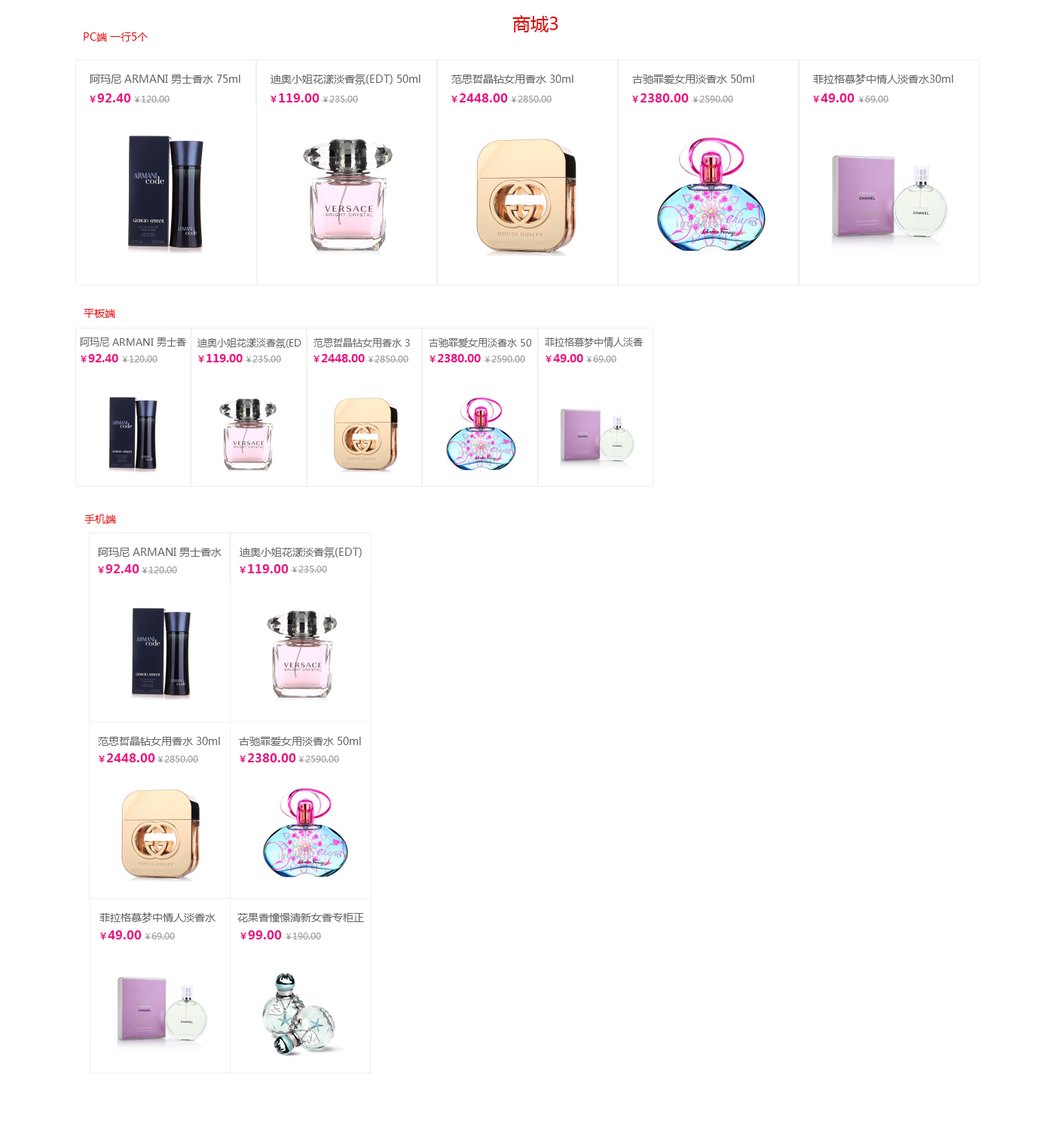
<style>
.page{position:relative;width:1055px;height:1130px;background:#ffffff}
.page>*{position:absolute;margin:0}
.t1{font:18.1px "MicrosoftYaHei";color:#e20404}
.t2{font:10.5px "MicrosoftYaHei";color:#e20404}
.t3{font:10.5px "MicrosoftYaHei";color:#666666}
.t4{font:12.1px "MicrosoftYaHei-Bold";color:#ed1283}
.t5{font:9px "MicrosoftYaHei-Bold";color:#ed1283}
.t6{font:9px "MicrosoftYaHei";color:#999999}
.t7{font:7.5px "MicrosoftYaHei";color:#999999}
.t8{font:9.8px "MicrosoftYaHei";color:#666666}
.t9{font:11.3px "MicrosoftYaHei-Bold";color:#ed1283}
</style>
<div class="page">
<p class="t1" style="left:512px;top:15px;width:46px;height:17px">商城3</p>
<p class="t2" style="left:84px;top:32px;width:64px;height:9px">PC端 一行5个</p>
<p class="t3" style="left:90px;top:75px;width:150px;height:9px">阿玛尼 ARMANI 男士香水 75ml</p>
<p class="t3" style="left:271px;top:74px;width:149px;height:10px">迪奥小姐花漾淡香氛(EDT) 50ml</p>
<p class="t3" style="left:451px;top:75px;width:122px;height:9px">范思哲晶钻女用香水 30ml</p>
<p class="t3" style="left:632px;top:75px;width:122px;height:9px">古驰罪爱女用淡香水 50ml</p>
<p class="t3" style="left:813px;top:74px;width:140px;height:10px">菲拉格慕梦中情人淡香水30ml</p>
<p class="t4" style="left:90px;top:93px;width:41px;height:9px"><span class="t5">￥</span>92.40</p>
<p class="t6" style="left:133px;top:96px;width:37px;height:6px"><span class="t7">￥</span>120.00</p>
<p class="t4" style="left:271px;top:93px;width:49px;height:9px"><span class="t5">￥</span>119.00</p>
<p class="t6" style="left:322px;top:96px;width:37px;height:6px"><span class="t7">￥</span>235.00</p>
<p class="t4" style="left:451px;top:93px;width:57px;height:9px"><span class="t5">￥</span>2448.00</p>
<p class="t6" style="left:510px;top:96px;width:42px;height:6px"><span class="t7">￥</span>2850.00</p>
<p class="t4" style="left:632px;top:93px;width:57px;height:9px"><span class="t5">￥</span>2380.00</p>
<p class="t6" style="left:692px;top:96px;width:42px;height:6px"><span class="t7">￥</span>2590.00</p>
<p class="t4" style="left:813px;top:93px;width:42px;height:9px"><span class="t5">￥</span>49.00</p>
<p class="t6" style="left:858px;top:96px;width:31px;height:6px"><span class="t7">￥</span>69.00</p>
<p class="t2" style="left:84px;top:309px;width:31px;height:9px">平板端</p>
<p class="t8" style="left:80px;top:338px;width:106px;height:9px">阿玛尼 ARMANI 男士香</p>
<p class="t8" style="left:197px;top:338px;width:104px;height:10px">迪奥小姐花漾淡香氛(ED</p>
<p class="t8" style="left:313px;top:338px;width:97px;height:9px">范思哲晶钻女用香水 3</p>
<p class="t8" style="left:429px;top:338px;width:102px;height:9px">古驰罪爱女用淡香水 50</p>
<p class="t8" style="left:545px;top:337px;width:98px;height:10px">菲拉格慕梦中情人淡香</p>
<p class="t9" style="left:81px;top:354px;width:37px;height:8px"><span class="t5">￥</span>92.40</p>
<p class="t6" style="left:121px;top:356px;width:37px;height:6px"><span class="t7">￥</span>120.00</p>
<p class="t9" style="left:198px;top:354px;width:45px;height:8px"><span class="t5">￥</span>119.00</p>
<p class="t6" style="left:245px;top:356px;width:37px;height:6px"><span class="t7">￥</span>235.00</p>
<p class="t9" style="left:313px;top:354px;width:52px;height:8px"><span class="t5">￥</span>2448.00</p>
<p class="t6" style="left:367px;top:356px;width:42px;height:6px"><span class="t7">￥</span>2850.00</p>
<p class="t9" style="left:430px;top:354px;width:51px;height:8px"><span class="t5">￥</span>2380.00</p>
<p class="t6" style="left:484px;top:356px;width:42px;height:6px"><span class="t7">￥</span>2590.00</p>
<p class="t9" style="left:546px;top:354px;width:37px;height:8px"><span class="t5">￥</span>49.00</p>
<p class="t6" style="left:586px;top:356px;width:31px;height:6px"><span class="t7">￥</span>69.00</p>
<p class="t2" style="left:84px;top:515px;width:32px;height:9px">手机端</p>
<p class="t3" style="left:98px;top:548px;width:124px;height:9px">阿玛尼 ARMANI 男士香水</p>
<p class="t3" style="left:240px;top:547px;width:122px;height:11px">迪奥小姐花漾淡香氛(EDT)</p>
<p class="t4" style="left:98px;top:564px;width:41px;height:9px"><span class="t5">￥</span>92.40</p>
<p class="t6" style="left:141px;top:567px;width:37px;height:6px"><span class="t7">￥</span>120.00</p>
<p class="t4" style="left:240px;top:564px;width:49px;height:9px"><span class="t5">￥</span>119.00</p>
<p class="t6" style="left:291px;top:566px;width:37px;height:7px"><span class="t7">￥</span>235.00</p>
<p class="t3" style="left:98px;top:737px;width:122px;height:9px">范思哲晶钻女用香水 30ml</p>
<p class="t3" style="left:239px;top:737px;width:122px;height:9px">古驰罪爱女用淡香水 50ml</p>
<p class="t4" style="left:99px;top:754px;width:56px;height:9px"><span class="t5">￥</span>2448.00</p>
<p class="t6" style="left:157px;top:756px;width:42px;height:7px"><span class="t7">￥</span>2850.00</p>
<p class="t4" style="left:240px;top:754px;width:56px;height:9px"><span class="t5">￥</span>2380.00</p>
<p class="t6" style="left:298px;top:756px;width:42px;height:7px"><span class="t7">￥</span>2590.00</p>
<p class="t3" style="left:99px;top:913px;width:117px;height:10px">菲拉格慕梦中情人淡香水</p>
<p class="t3" style="left:237px;top:913px;width:127px;height:9px">花果香憧憬清新女香专柜正</p>
<p class="t4" style="left:100px;top:931px;width:42px;height:9px"><span class="t5">￥</span>49.00</p>
<p class="t6" style="left:144px;top:933px;width:32px;height:7px"><span class="t7">￥</span>69.00</p>
<p class="t4" style="left:240px;top:931px;width:42px;height:9px"><span class="t5">￥</span>99.00</p>
<p class="t6" style="left:285px;top:933px;width:37px;height:7px"><span class="t7">￥</span>190.00</p>
</div>
